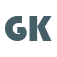
<style>
.page{position:relative;width:57px;height:57px;background:#ffffff}
.page>*{position:absolute;margin:0}
.t1{font:38px "Bauhaus93";color:#455e68}
</style>
<div class="page">
<p class="t1" style="left:5px;top:16px;width:47px;height:25px">GK</p>
</div>
